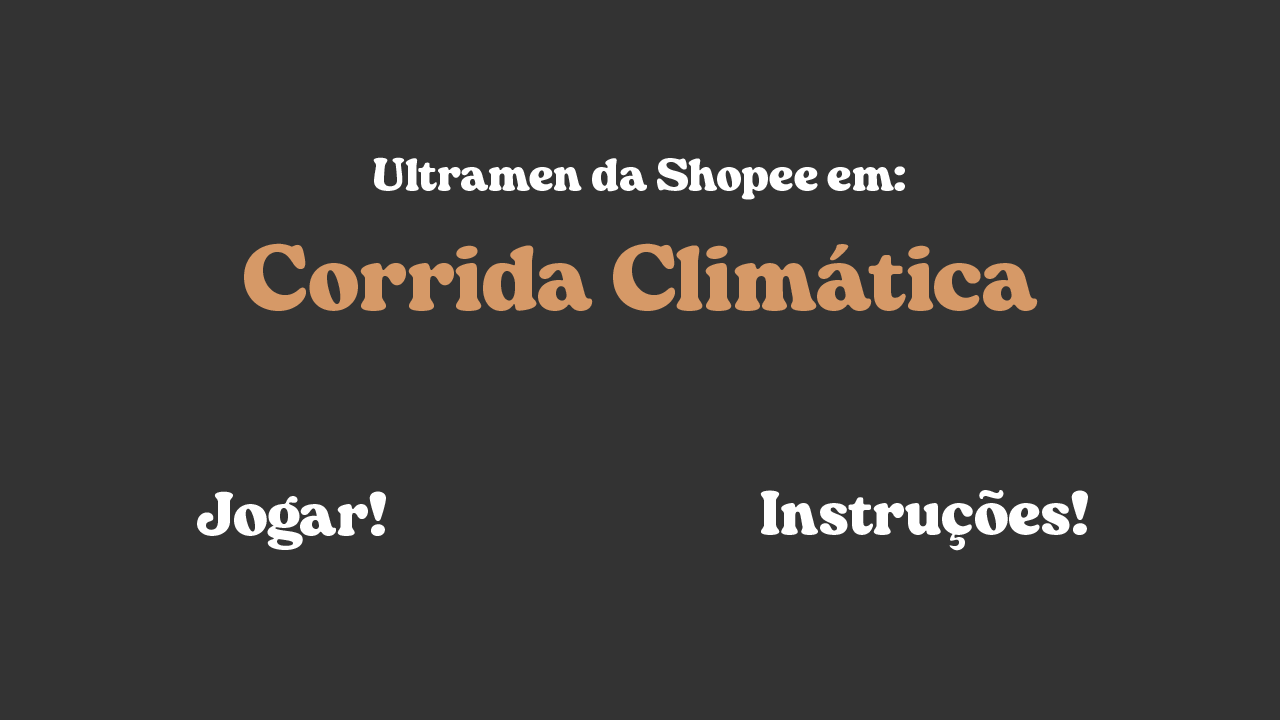
<style>
.page{position:relative;width:1280px;height:720px;background:#333333}
.page>*{position:absolute;margin:0}
.t1{font:50px "Manchego-Black";color:#ffffff}
.t2{font:100px "Manchego-Black";color:#d69967}
.t3{font:66.7px "Manchego-Black";color:#ffffff}
</style>
<div class="page">
<p class="t1" style="left:244px;top:157px;width:794px;height:154px;text-align:center">Ultramen da Shopee em:<br><span class="t2">Corrida Climática</span></p>
<p class="t3" style="left:197px;top:491px;width:189px;height:59px">Jogar!</p>
<p class="t3" style="left:760px;top:490px;width:328px;height:61px">Instruções!</p>
</div>
